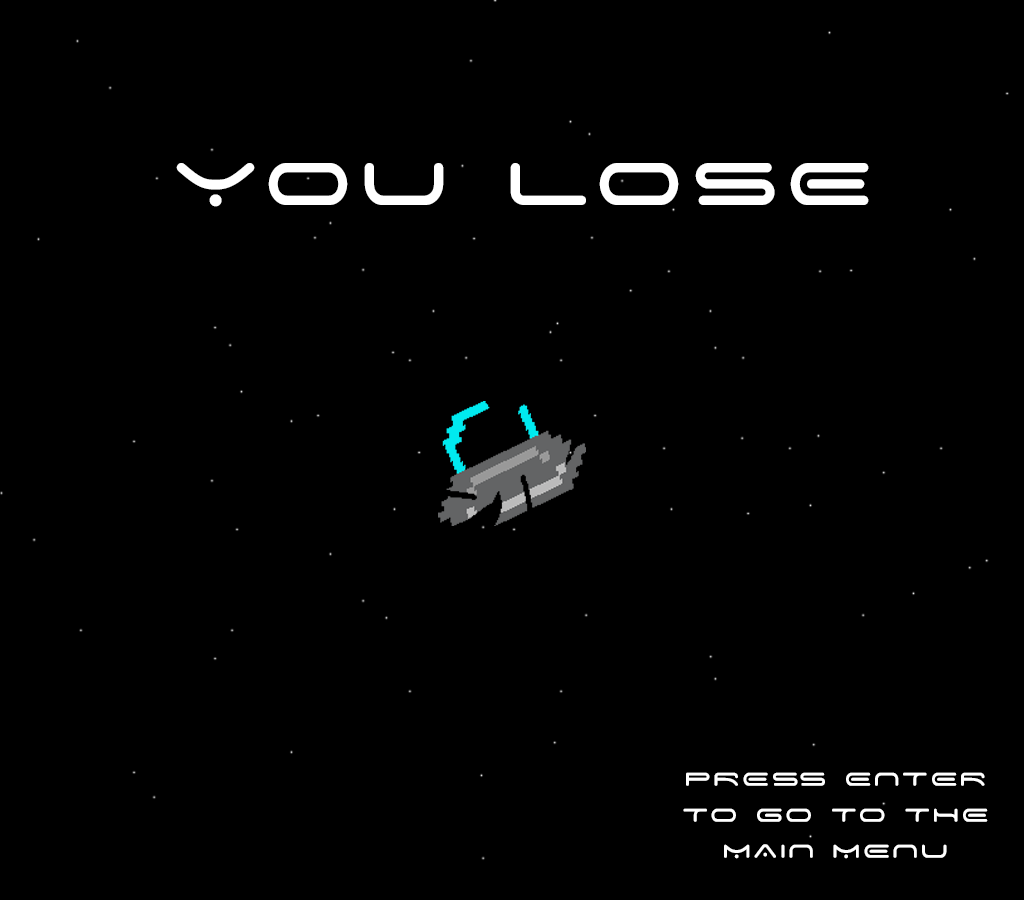
<style>
.page{position:relative;width:1024px;height:900px;background:#000000}
.page>*{position:absolute;margin:0}
.t1{font:96.4px "SpaceAge";letter-spacing:0.075em;color:#ffffff}
.t2{font:30px "SpaceAge";letter-spacing:0.075em;color:#ffffff}
</style>
<div class="page">
<p class="t1" style="left:176px;top:163px;width:693px;height:44px">YOU LOSE</p>
<p class="t2" style="left:683px;top:772px;width:305px;height:87px;text-align:center">PRESS ENTER TO GO TO THE MAIN MENU</p>
</div>
